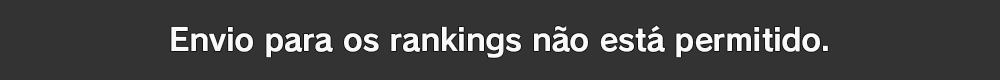
<style>
.page{position:relative;width:1000px;height:80px;background:#333333}
.page>*{position:absolute;margin:0}
.t1{font:30.7px "RodinPro-B";letter-spacing:-0.011em;color:#fbfafb}
</style>
<div class="page">
<p class="t1" style="left:171px;top:25px;width:657px;height:33px">Envio para os rankings não está permitido.</p>
</div>
